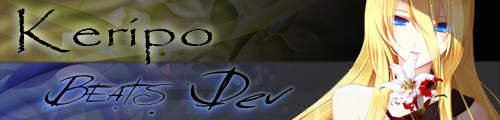
<style>
.page{position:relative;width:500px;height:120px}
.page>*{position:absolute;margin:0}
.t1{font:45.5px "Papyrus-Regular";color:#000000;scale:1.44 1}
.t2{font:14px "SundayMonday";color:#000000;scale:1.47 1}
.t3{font:24px "SundayMonday";color:#000000;scale:1.47 1}
</style>
<div class="page">
<p class="t1" style="left:17px;top:8px;width:196px;height:57px">Keripo</p>
<p class="t2" style="left:29px;top:66px;width:265px;height:50px;rotate:1deg"><span class="t3">B</span>EATS<span class="t3"> Dev</span></p>
</div>
